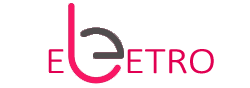
<style>
.page{position:relative;width:250px;height:88px;background:#ffffff}
.page>*{position:absolute;margin:0}
.t1{font:37.3px "Calibri-Light";color:#e10052;scale:1.15 1}
</style>
<div class="page">
<p class="t1" style="left:48px;top:49px;width:166px;height:25px">E      ETRO</p>
</div>
